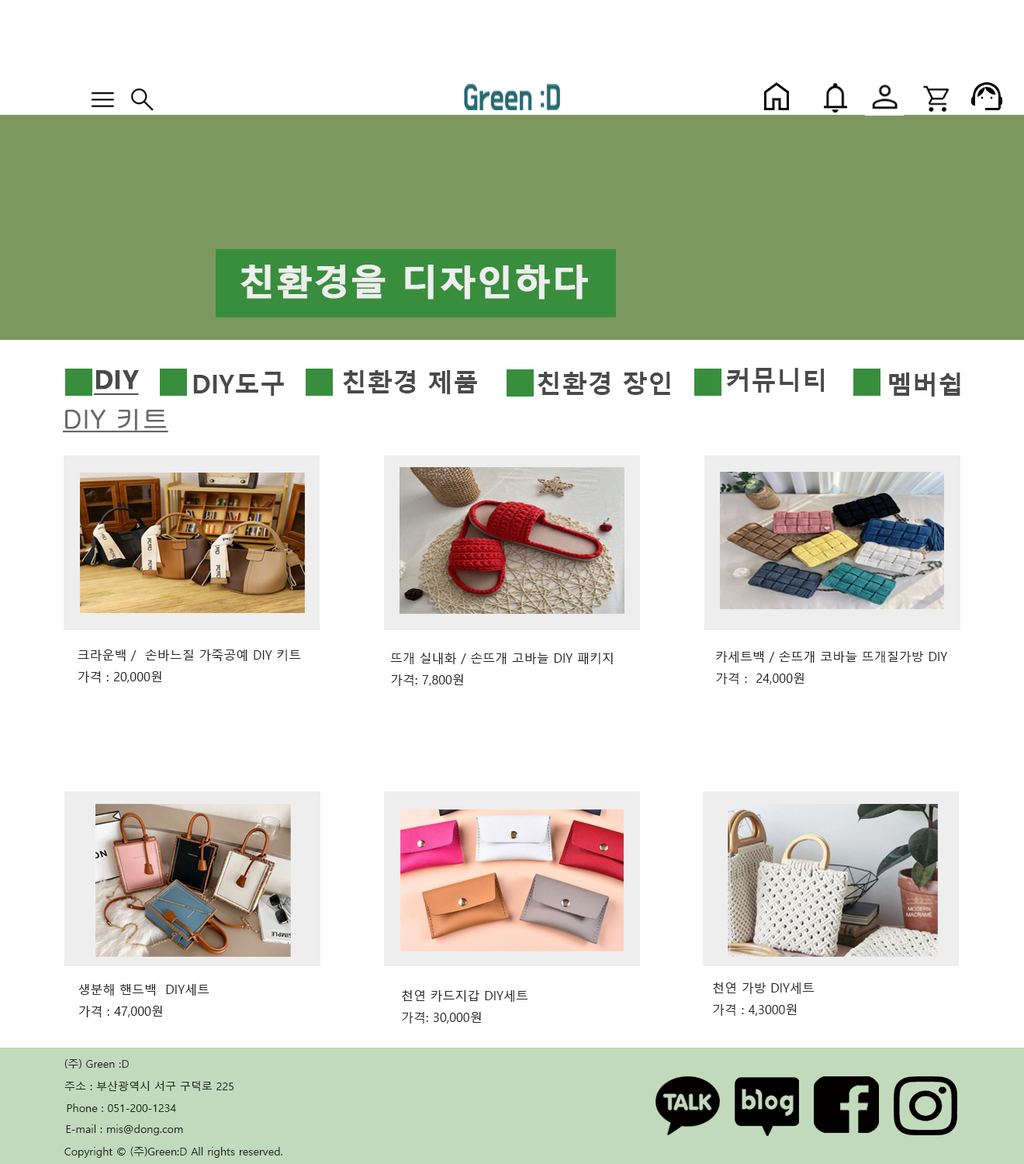
<style>
.page{position:relative;width:1024px;height:1164px;background:#ffffff}
.page>*{position:absolute;margin:0}
.t1{font:36.5px "MalgunGothicBold";color:#eeeeee;font-weight:bold}
.t2{font:25.6px "MalgunGothicBold";color:#4a4a4a;font-weight:bold;text-decoration:underline}
.t3{font:25.6px "MalgunGothicBold";color:#4a4a4a}
.t4{font:25.6px "Gulim";color:#676767;font-weight:bold;text-decoration:underline}
.t5{font:12.4px "MalgunGothic";color:#262626}
.t6{font:10.9px "MalgunGothic";color:#262626}
</style>
<div class="page">
<p class="t1" style="left:241px;top:265px;width:347px;height:35px">친환경을 디자인하다</p>
<p class="t2" style="left:93px;top:370px;width:46px;height:25px">DIY</p>
<p class="t3" style="left:193px;top:372px;width:91px;height:24px">DIY도구</p>
<p class="t3" style="left:343px;top:370px;width:134px;height:24px">친환경 제품</p>
<p class="t3" style="left:538px;top:372px;width:132px;height:23px">친환경 장인</p>
<p class="t3" style="left:726px;top:368px;width:98px;height:25px">커뮤니티</p>
<p class="t3" style="left:889px;top:372px;width:72px;height:25px">멤버쉽</p>
<p class="t4" style="left:63px;top:409px;width:105px;height:24px">DIY 키트</p>
<p class="t5" style="left:78px;top:650px;width:223px;height:33px">크라운백 /  손바느질 가죽공예 DIY 키트<br>가격 : 20,000원</p>
<p class="t5" style="left:390px;top:653px;width:223px;height:33px">뜨개 실내화 / 손뜨개 고바늘 DIY 패키지<br>가격: 7,800원</p>
<p class="t5" style="left:716px;top:651px;width:232px;height:33px">카세트백 / 손뜨개 코바늘 뜨개질가방 DIY<br>가격 :  24,000원</p>
<p class="t5" style="left:78px;top:984px;width:132px;height:33px">생분해 핸드백  DIY세트<br>가격 : 47,000원</p>
<p class="t5" style="left:713px;top:982px;width:102px;height:34px">천연 가방 DIY세트<br>가격 : 4,3000원</p>
<p class="t5" style="left:402px;top:990px;width:126px;height:34px">천연 카드지갑 DIY세트<br>가격: 30,000원</p>
<p class="t6" style="left:64px;top:1059px;width:65px;height:10px">(주) Green :D</p>
<p class="t6" style="left:64px;top:1081px;width:170px;height:10px">주소 : 부산광역시 서구 구덕로 225</p>
<p class="t6" style="left:67px;top:1104px;width:109px;height:8px">Phone : 051-200-1234</p>
<p class="t6" style="left:66px;top:1124px;width:117px;height:11px">E-mail : mis@dong.com</p>
<p class="t6" style="left:64px;top:1147px;width:218px;height:11px">Copyright © (주)Green:D All rights reserved.</p>
</div>
